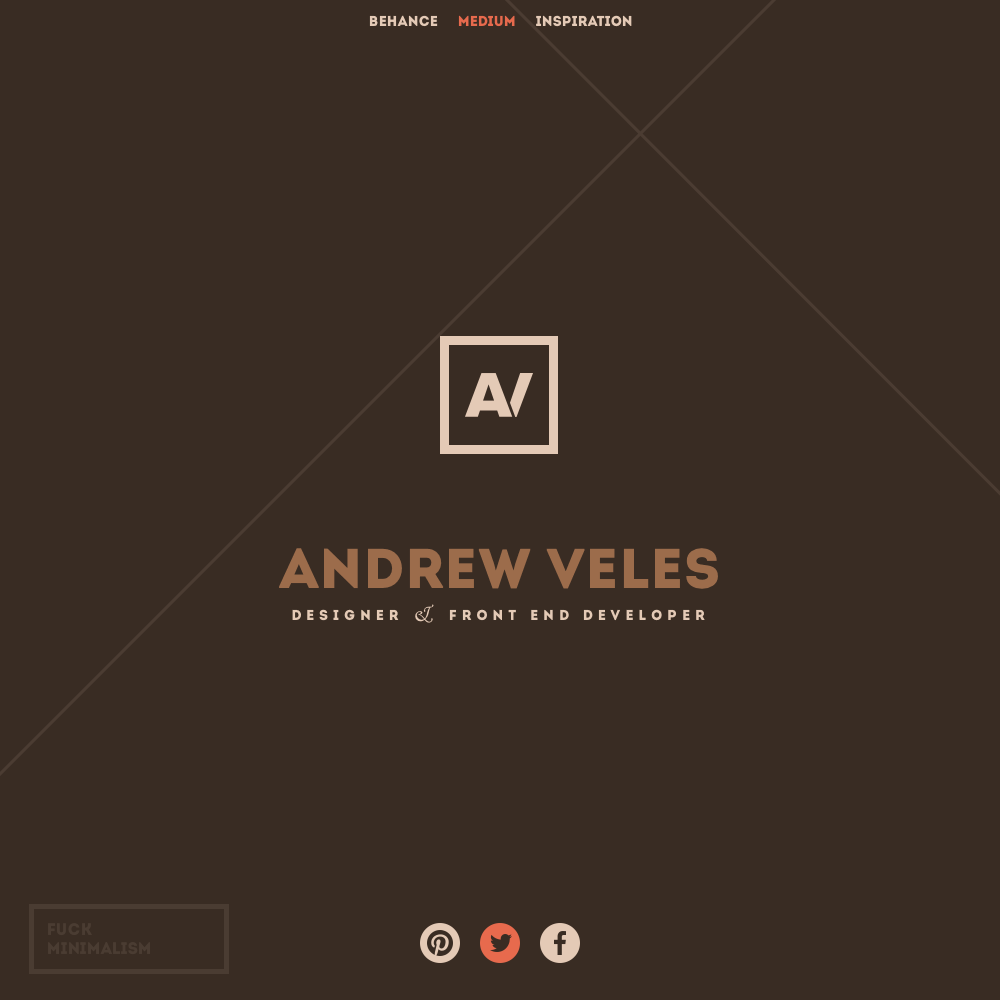
<style>
.page{position:relative;width:1000px;height:1000px;background:#392c23}
.page>*{position:absolute;margin:0}
.t1{font:14px "Intro";color:#e4cab6}
.t2{font:14px "Intro";color:#e76a4d}
.t3{font:56px "Intro";color:#9c6c4b}
.t4{font:14px "Intro";letter-spacing:0.35em;color:#e4cab6;text-transform:uppercase}
.t5{font:24px "MonotypeCorsiva";letter-spacing:0.35em;color:#e4cab6}
.t6{font:16px "Intro";color:#4a3c32}
</style>
<div class="page">
<p class="t1" style="left:369px;top:15px;width:263px;height:12px">Behance     <span class="t2">Medium</span>     Inspiration</p>
<p class="t3" style="left:279px;top:548px;width:439px;height:41px">Andrew Veles</p>
<p class="t4" style="left:292px;top:604px;width:413px;height:19px">Designer <span class="t5">&amp; </span>Front End developer</p>
<p class="t6" style="left:48px;top:923px;width:102px;height:32px">fuck<br>minimalism</p>
</div>
